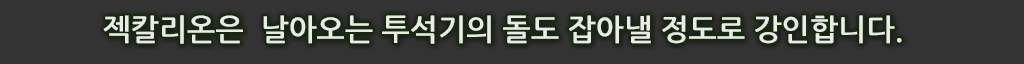
<style>
.page{position:relative;width:1024px;height:64px;background:#333333}
.page>*{position:absolute;margin:0}
.t1{font:30px "NanumGothicBold";color:#fefefe}
</style>
<div class="page">
<p class="t1" style="left:103px;top:15px;width:799px;height:29px;opacity:0.9">젝칼리온은  날아오는 투석기의 돌도 잡아낼 정도로 강인합니다.</p>
</div>
